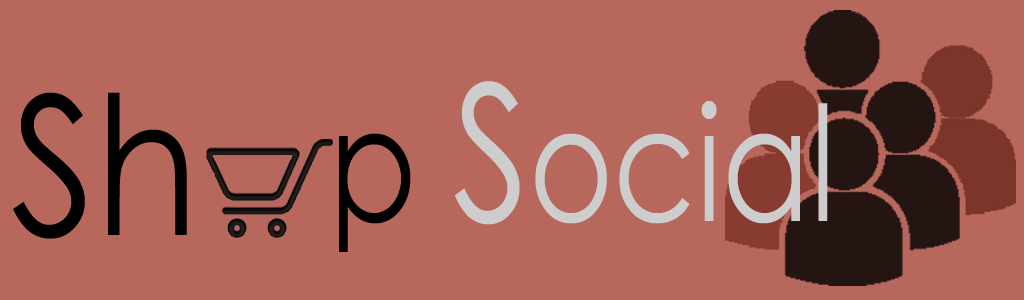
<style>
.page{position:relative;width:1024px;height:300px;background:#b8675c}
.page>*{position:absolute;margin:0}
.t1{font:160px "CenturyGothic";color:#cdcdcd;scale:0.8 1}
.t2{font:160px "CenturyGothic";color:#000000;scale:0.8 1}
.t3{font:190px "CenturyGothic";color:#cdcdcd;scale:0.8 1}
</style>
<div class="page">
<p class="t1" style="left:339px;top:81px;width:489px;height:171px"><span class="t2">p </span><span class="t3">S</span>ocial</p>
</div>
